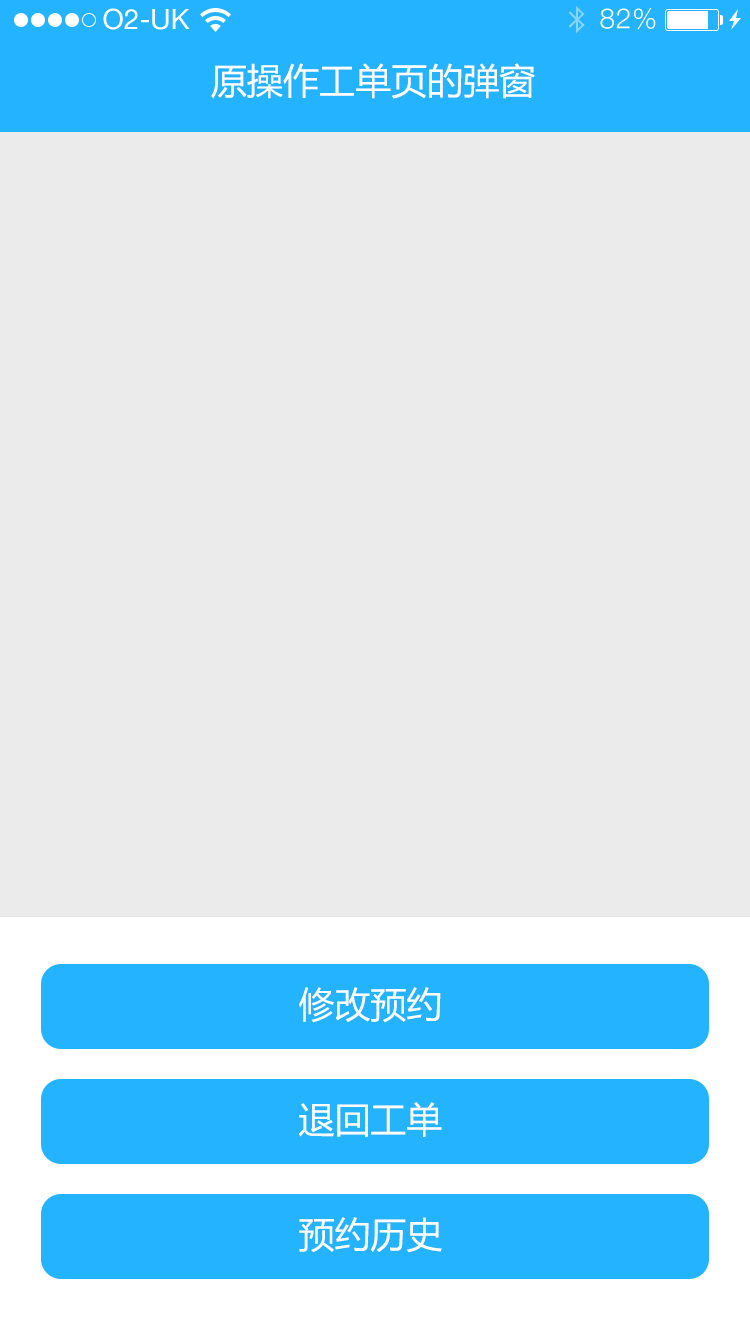
<style>
.page{position:relative;width:750px;height:1334px;background:#ebebeb}
.page>*{position:absolute;margin:0}
.t1{font:36px "MicrosoftYaHei";color:#feffff}
.t2{font:36px "MicrosoftYaHei";color:#ffffff}
</style>
<div class="page">
<p class="t1" style="left:211px;top:63px;width:324px;height:36px">原操作工单页的弹窗</p>
<p class="t2" style="left:299px;top:987px;width:142px;height:36px">修改预约</p>
<p class="t2" style="left:299px;top:1102px;width:143px;height:35px">退回工单</p>
<p class="t2" style="left:299px;top:1217px;width:143px;height:36px">预约历史</p>
</div>
